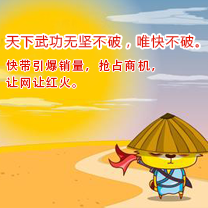
<style>
.page{position:relative;width:208px;height:208px}
.page>*{position:absolute;margin:0}
.t1{font:13px "MicrosoftYaHei";letter-spacing:0.1em;color:#e21301}
.t2{font:12px "AdobeHeitiStd-Regular";letter-spacing:0.1em;color:#e21301}
</style>
<div class="page">
<p class="t1" style="left:6px;top:34px;width:193px;height:14px">天下武功无坚不破，唯快不破。</p>
<p class="t2" style="left:6px;top:59px;width:149px;height:13px">快带引爆销量，抢占商机，</p>
<p class="t2" style="left:6px;top:76px;width:70px;height:13px">让网让红火。</p>
</div>
